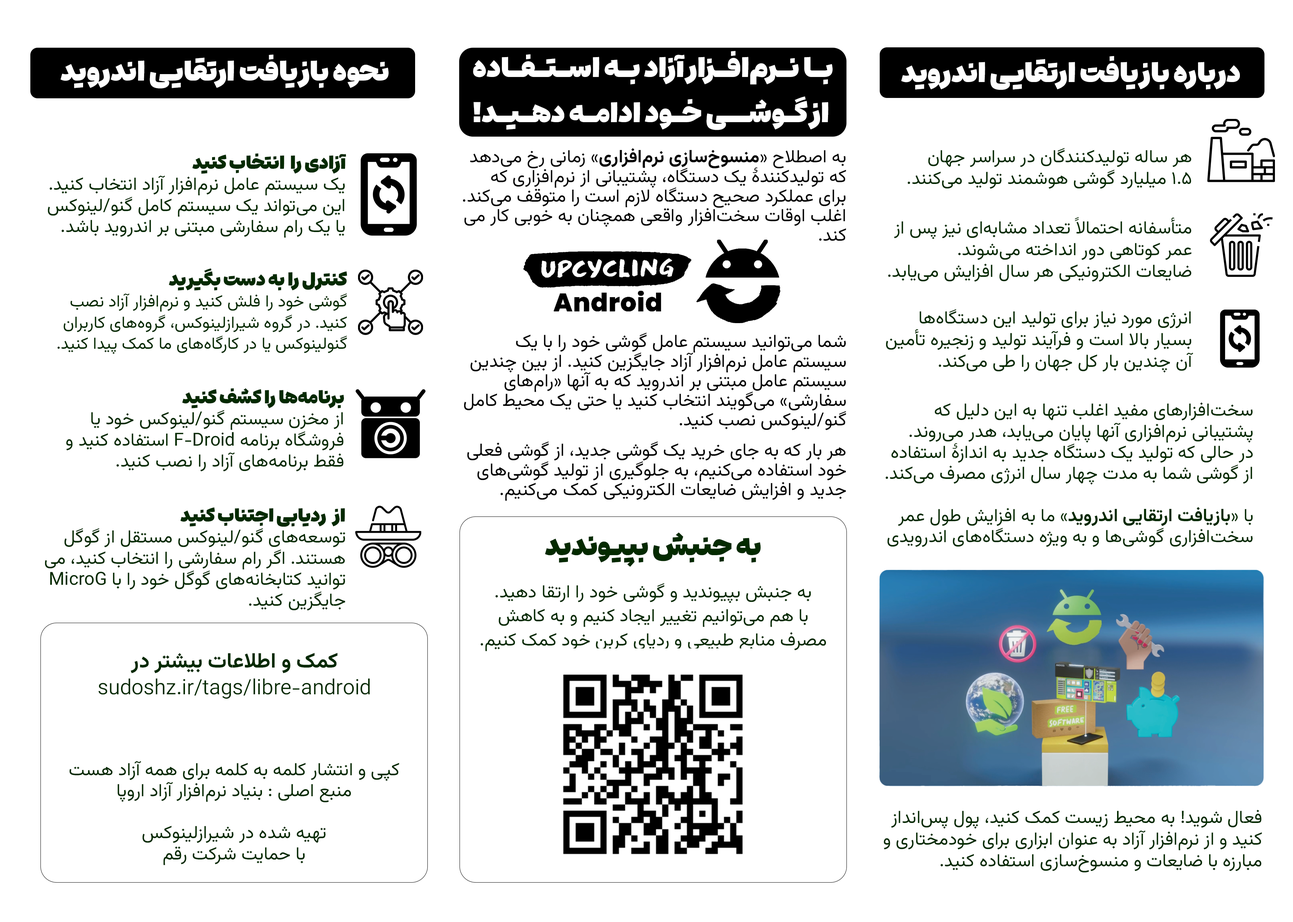
<style>
.page{position:relative;width:1293px;height:922px;background:#ffffff}
.page>*{position:absolute;margin:0}
.t1{font:27.1px/45.2px "EstedadMad-Fat";color:#ffffff}
.t2{font:27.1px "EstedadMad-Fat";color:#ffffff}
.t3{font:27.1px "EstedadMad-Fat";color:#fefefe}
.t4{font:18.1px/19.6px "Vazirmatn-Regular";color:#000000}
.t5{font:18.1px/19.6px "Vazirmatn-Bold";color:#000000}
.t6{font:18.1px "Vazirmatn-Regular";color:#042a00}
.t7{font:18.1px/21.1px "Vazirmatn-Regular";color:#042a00}
.t8{font:18.1px/21.1px "EstedadMad-Fat";color:#042a00}
.t9{font:16.6px/21.1px "Vazirmatn-Regular";color:#042a00}
.t10{font:18.1px/21.1px "Vazirmatn-Bold";color:#042a00}
.t11{font:27.1px "EstedadMad-Fat";color:#042a00}
.t12{font:18.1px/24.1px "Vazirmatn-Regular";color:#042a00}
.t13{font:21.1px "Vazirmatn-Bold";color:#042a00}
.t14{font:21.1px "Vazirmatn-Light";color:#042a00}
</style>
<div class="page">
<p class="t1" style="left:473px;top:51px;width:360px;height:79px;text-align:center">بـا نـرم‌افـزار آزاد بـه اسـتـفـاده <br>از گـوشــی خـود ادامـه دهـیـد!</p>
<p class="t2" style="left:60px;top:55px;width:329px;height:34px">نحوه بازیافت ارتقایی اندروید</p>
<p class="t3" style="left:901px;top:56px;width:339px;height:34px">درباره بازیافت ارتقایی اندروید</p>
<p class="t4" style="left:463px;top:148px;width:383px;height:93px">به اصطلاح «<span class="t5">منسوخ‌سازی نرم‌افزاری</span>» زمانی رخ می‌دهد که تولیدکنندهٔ یک دستگاه، پشتیبانی از نرم‌افزاری که برای عملکرد صحیح دستگاه لازم است را متوقف می‌کند. اغلب اوقات سخت‌افزار واقعی همچنان به خوبی کار می‌کند.</p>
<p class="t6" style="left:908px;top:148px;width:284px;height:41px">هر ساله تولیدکنندگان در سراسر جهان <br>۱.۵ میلیارد گوشی هوشمند تولید می‌کنند.</p>
<p class="t7" style="left:48px;top:153px;width:298px;height:85px"><span class="t8">آزادی را  انتخاب کنید<br></span>یک سیستم عامل نرم‌افزار آزاد انتخاب کنید. این می‌تواند یک سیستم کامل گنو/لینوکس یا یک رام سفارشی مبتنی بر اندروید باشد.</p>
<p class="t6" style="left:888px;top:217px;width:304px;height:65px">متأسفانه احتمالاً تعداد مشابه‌ای نیز پس از عمر کوتاهی دور انداخته می‌شوند.<br>ضایعات الکترونیکی هر سال افزایش می‌یابد.</p>
<p class="t9" style="left:57px;top:268px;width:290px;height:86px"><span class="t8">کنترل را به دست بگیرید<br></span>گوشی خود را فلش کنید و نرم‌افزار آزاد نصب کنید. در گروه شیرازلینوکس، گروه‌های کاربران گنولینوکس یا در کارگاه‌های ما کمک پیدا کنید.</p>
<p class="t6" style="left:886px;top:309px;width:308px;height:64px">انرژی مورد نیاز برای تولید این دستگاه‌ها بسیار بالا است و فرآیند تولید و زنجیره تأمین آن چندین بار کل جهان را طی می‌کند.</p>
<p class="t4" style="left:464px;top:332px;width:382px;height:98px">شما می‌توانید سیستم عامل گوشی خود را با یک سیستم عامل نرم‌افزار آزاد جایگزین کنید. از بین چندین سیستم عامل مبتنی بر اندروید که به آنها «رام‌های سفارشی» می‌گویند انتخاب کنید یا حتی یک محیط کامل گنو/لینوکس نصب کنید.<br>هر بار که به جای خرید یک گوشی جدید، از گوشی فعلی خود استفاده می‌کنیم، به جلوگیری از تولید گوشی‌های جدید و افزایش ضایعات الکترونیکی کمک می‌کنیم.</p>
<p class="t7" style="left:66px;top:388px;width:278px;height:84px"><span class="t8">برنامه‌ها را کشف کنید<br></span>از مخزن سیستم گنو/لینوکس خود یا فروشگاه برنامه F-Droid استفاده کنید و فقط برنامه‌های آزاد را نصب کنید.</p>
<p class="t7" style="left:886px;top:402px;width:367px;height:145px">سخت‌افزارهای مفید اغلب تنها به این دلیل که پشتیبانی نرم‌افزاری آنها پایان می‌یابد، هدر می‌روند.<br>در حالی که تولید یک دستگاه جدید به اندازهٔ استفاده از گوشی شما به مدت چهار سال انرژی مصرف می‌کند.<br><br>با «<span class="t10">بازیافت ارتقایی اندروید</span>» ما به افزایش طول عمر سخت‌افزاری گوشی‌ها و به ویژه دستگاه‌های اندرویدی کمک می‌کنیم</p>
<p class="t4" style="left:467px;top:441px;width:379px;height:60px">هر بار که به جای خرید یک گوشی جدید، از گوشی فعلی خود استفاده می‌کنیم، به جلوگیری از تولید گوشی‌های جدید و افزایش ضایعات الکترونیکی کمک می‌کنیم.</p>
<p class="t7" style="left:45px;top:507px;width:300px;height:103px"><span class="t8">از   ردیابی اجتناب کنید<br></span>توسعه‌های گنو/لینوکس مستقل از گوگل هستند. اگر رام سفارشی را انتخاب کنید، می‌توانید کتابخانه‌های گوگل خود را با MicroG جایگزین کنید.</p>
<p class="t11" style="left:545px;top:532px;width:216px;height:35px">به جنبش بپیوندید</p>
<p class="t12" style="left:481px;top:583px;width:346px;height:69px;text-align:center">به جنبش بپیوندید و گوشی خود را ارتقا دهید.<br>با هم می‌توانیم تغییر ایجاد کنیم و به کاهش مصرف منابع طبیعی و ردپای کربن خود کمک کنیم.</p>
<p class="t13" style="left:130px;top:653px;width:208px;height:20px">کمک و اطلاعات بیشتر در</p>
<p class="t14" style="left:98px;top:678px;width:272px;height:21px">sudoshz.ir/tags/libre-android</p>
<p class="t7" style="left:69px;top:761px;width:330px;height:104px;text-align:center">کپی و انتشار کلمه به کلمه برای همه آزاد هست<br>منبع اصلی : بنیاد نرم‌افزار آزاد اروپا<br><br>تهیه شده در شیرازلینوکس<br>با حمایت شرکت رقم</p>
<p class="t6" style="left:884px;top:810px;width:378px;height:62px">فعال شوید! به محیط زیست کمک کنید، پول پس‌انداز کنید و از نرم‌افزار آزاد به عنوان ابزاری برای خودمختاری و مبارزه با ضایعات و منسوخ‌سازی استفاده کنید.</p>
</div>
